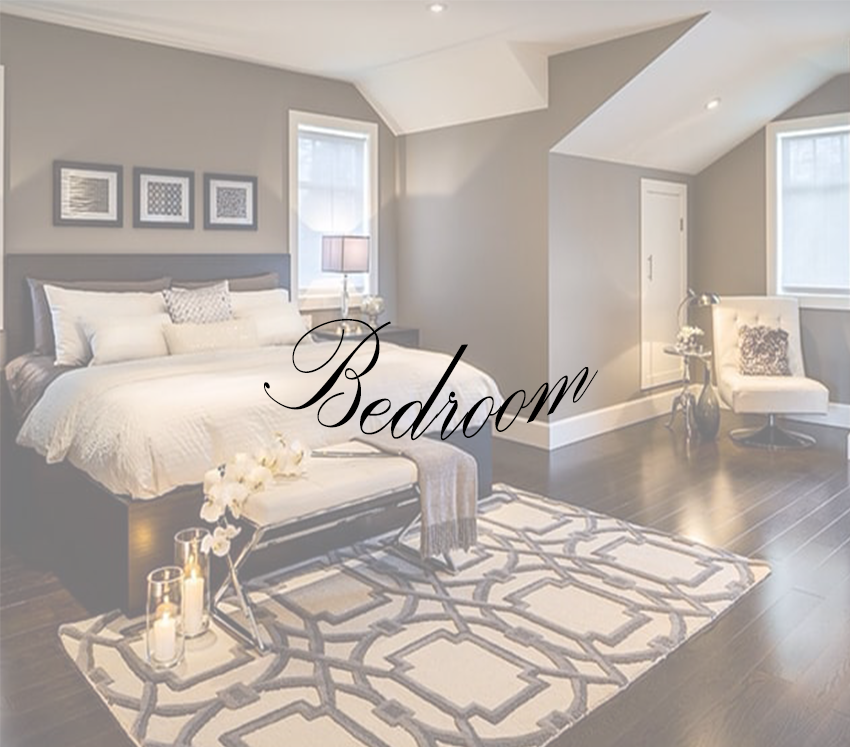
<style>
.page{position:relative;width:851px;height:747px}
.page>*{position:absolute;margin:0}
.t1{font:150px "PalaceScriptMT";color:#000000}
</style>
<div class="page">
<p class="t1" style="left:264px;top:319px;width:334px;height:122px">Bedroom</p>
</div>
